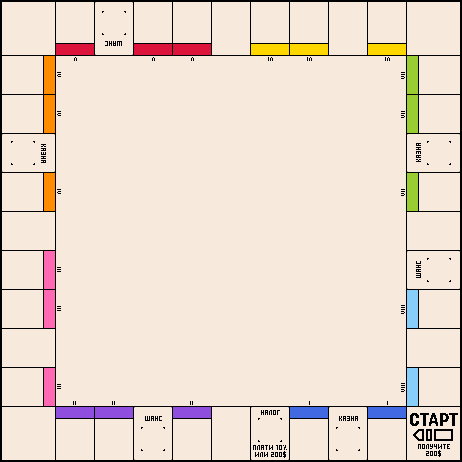
<style>
.page{position:relative;width:462px;height:462px;background:#f7eadc}
.page>*{position:absolute;margin:0}
.t1{font:7px "BITach";color:#000000}
.t2{font:7px/7px "BITach";color:#000000}
</style>
<div class="page">
<p class="t1" style="left:105px;top:41px;width:17px;height:5px;rotate:180deg">шанс</p>
<p class="t1" style="left:41px;top:144px;width:5px;height:19px;rotate:90deg">казна</p>
<p class="t1" style="left:416px;top:143px;width:5px;height:19px;rotate:-90deg">казна</p>
<p class="t1" style="left:416px;top:261px;width:5px;height:17px;rotate:-90deg">шанс</p>
<p class="t2" style="left:253px;top:410px;width:34px;height:48px;text-align:center">налог<br><br><br><br><br>плати 10%<br>или 200$</p>
<p class="t1" style="left:145px;top:416px;width:17px;height:5px">шанс</p>
<p class="t1" style="left:339px;top:416px;width:19px;height:5px">казна</p>
</div>
